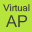
<style>
.page{position:relative;width:32px;height:32px;background:#b6e43a}
.page>*{position:absolute;margin:0}
.t1{font:9px "Kartika";color:#3a3a3a}
.t2{font:16px "Kartika";color:#3a3a3a}
</style>
<div class="page">
<p class="t1" style="left:3px;top:4px;width:27px;height:8px">Virtual</p>
<p class="t2" style="left:6px;top:15px;width:22px;height:13px">AP</p>
</div>
